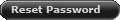
<style>
.page{position:relative;width:120px;height:20px;background:#1a1b1b}
.page>*{position:absolute;margin:0}
.t1{font:10px "Verdana-Bold";color:#d1d1d1}
</style>
<div class="page">
<p class="t1" style="left:11px;top:5px;width:89px;height:8px">Reset Password</p>
</div>
